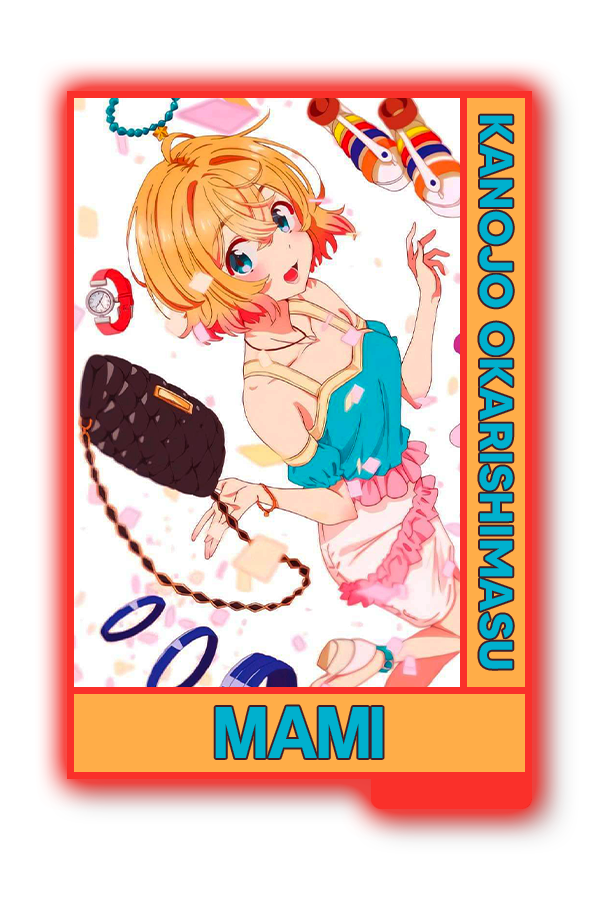
<style>
.page{position:relative;width:600px;height:900px;background:#ffffff}
.page>*{position:absolute;margin:0}
.t1{font:45.9px "MADETOMMY-Bold";color:#00c3d9}
.t2{font:76.6px "CoolveticaRg-Regular";color:#00c3d9}
</style>
<div class="page">
<p class="t1" style="left:479px;top:115px;width:34px;height:554px;rotate:90deg">KANOJO OKARISHIMASU</p>
<p class="t2" style="left:215px;top:706px;width:168px;height:52px">MAMI</p>
</div>
